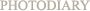
<style>
.page{position:relative;width:90px;height:11px;background:#ffffff}
.page>*{position:absolute;margin:0}
.t1{font:14px "TimesNewRomanPSMT";color:#b4ad9e;text-transform:uppercase}
</style>
<div class="page">
<p class="t1" style="left:0px;top:0px;width:90px;height:11px">photodiary</p>
</div>
